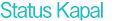
<style>
.page{position:relative;width:129px;height:21px;background:#ffffff}
.page>*{position:absolute;margin:0}
.t1{font:20px "GothicMB101Pro-Regular";letter-spacing:-0.06em;color:#1dbcc0;scale:0.9 1}
</style>
<div class="page">
<p class="t1" style="left:0px;top:1px;width:103px;height:20px">Status Kapal</p>
</div>
